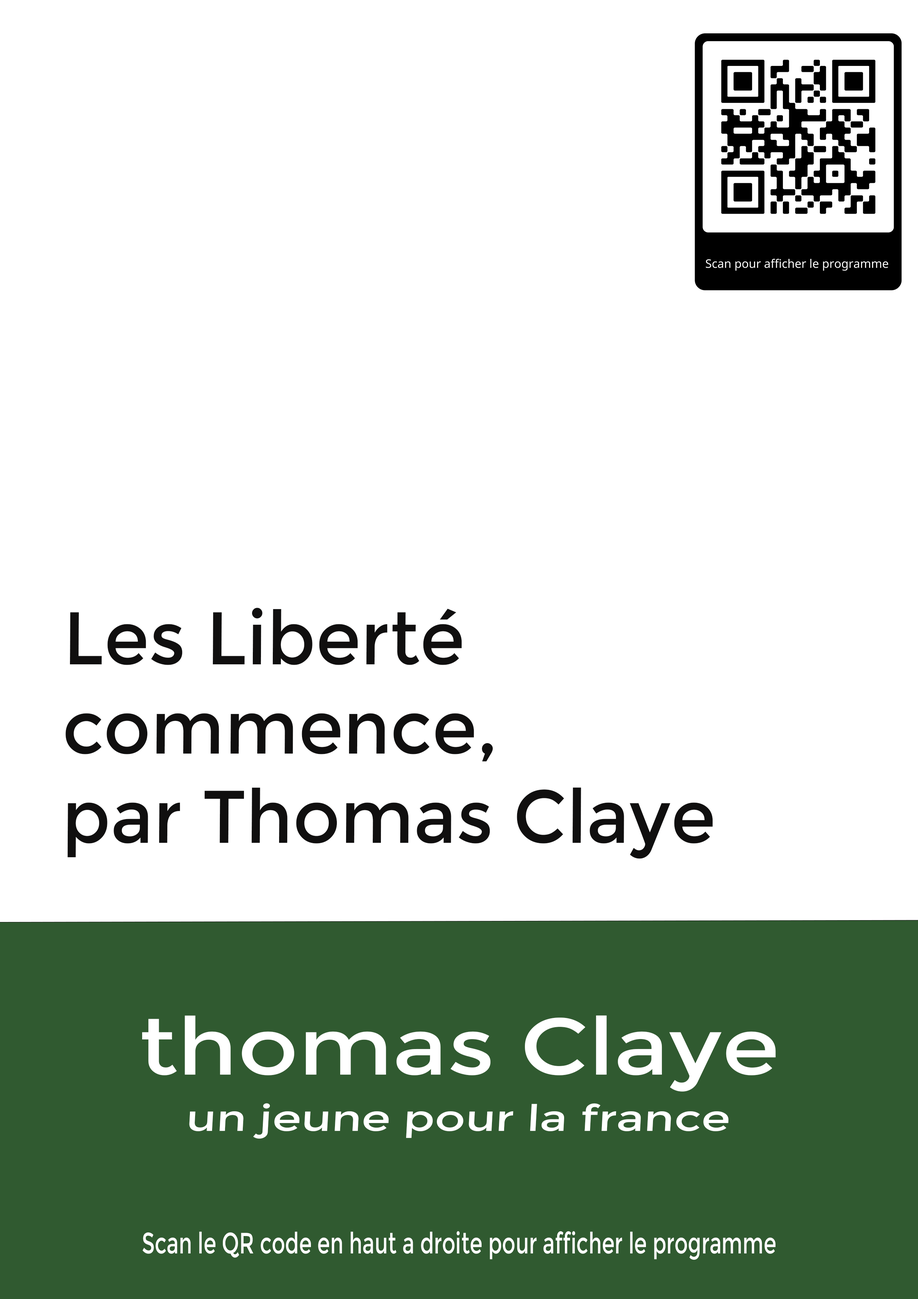
<style>
.page{position:relative;width:918px;height:1299px;background:#ffffff}
.page>*{position:absolute;margin:0}
.t1{font:74.4px "Montserrat-Regular";color:#100f0f}
.t2{font:79.6px "Montserrat-Regular";color:#ffffff;scale:1.17 1}
.t3{font:36.5px "Montserrat-Regular";color:#ffffff;scale:1.28 1}
.t4{font:29.4px "Montserrat-Regular";color:#ffffff;scale:0.7 1}
</style>
<div class="page">
<p class="t1" style="left:66px;top:608px;width:647px;height:251px">Les Liberté commence,<br>par Thomas Claye</p>
<p class="t2" style="left:142px;top:1015px;width:634px;height:76px">thomas Claye</p>
<p class="t3" style="left:189px;top:1103px;width:540px;height:35px">un jeune pour la france</p>
<p class="t4" style="left:143px;top:1231px;width:633px;height:28px">Scan le QR code en haut a droite pour afficher le programme</p>
</div>
